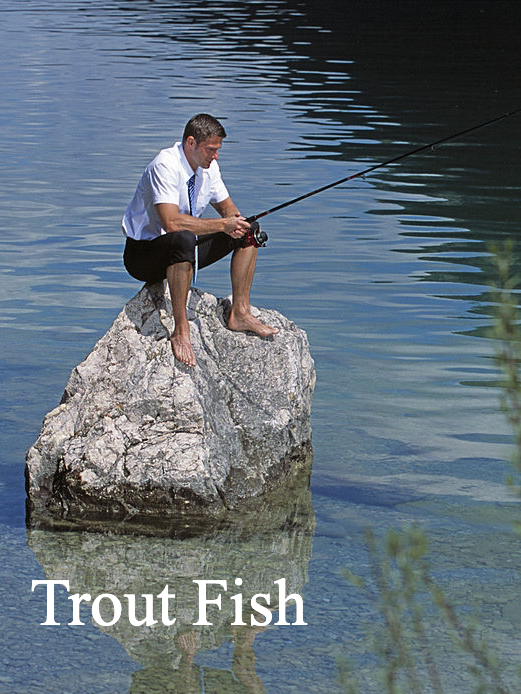
<style>
.page{position:relative;width:521px;height:694px}
.page>*{position:absolute;margin:0}
.t1{font:66.7px "TimesNewRomanPSMT";color:#ffffff}
</style>
<div class="page">
<p class="t1" style="left:31px;top:578px;width:277px;height:48px">Trout Fish</p>
</div>
